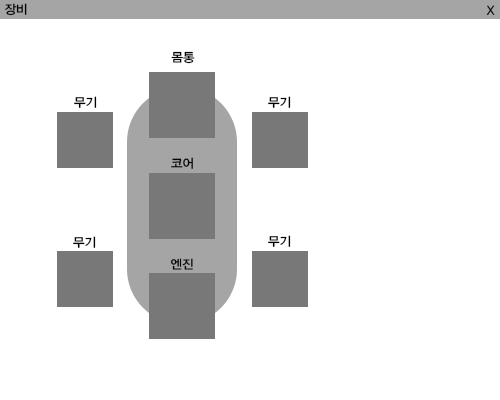
<style>
.page{position:relative;width:500px;height:400px;background:#ffffff}
.page>*{position:absolute;margin:0}
.t1{font:12.5px "YDIYGO330";letter-spacing:0.01em;color:#000000}
</style>
<div class="page">
<p class="t1" style="left:4px;top:3px;width:23px;height:13px">장비</p>
<p class="t1" style="left:486px;top:5px;width:9px;height:10px">X</p>
<p class="t1" style="left:171px;top:51px;width:24px;height:13px">몸통</p>
<p class="t1" style="left:74px;top:96px;width:23px;height:12px">무기</p>
<p class="t1" style="left:268px;top:96px;width:23px;height:12px">무기</p>
<p class="t1" style="left:171px;top:157px;width:22px;height:12px">코어</p>
<p class="t1" style="left:73px;top:236px;width:23px;height:12px">무기</p>
<p class="t1" style="left:268px;top:235px;width:23px;height:12px">무기</p>
<p class="t1" style="left:170px;top:258px;width:23px;height:12px">엔진</p>
</div>
